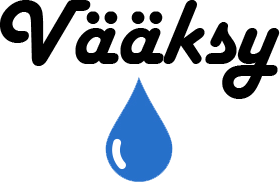
<style>
.page{position:relative;width:280px;height:182px;background:#ffffff}
.page>*{position:absolute;margin:0}
.t1{font:95.9px "HarlowSolid";color:#000000}
</style>
<div class="page">
<p class="t1" style="left:0px;top:0px;width:280px;height:99px">Vääksy</p>
</div>
